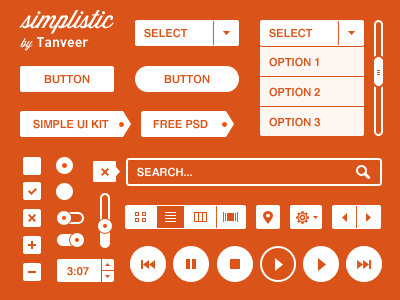
<style>
.page{position:relative;width:400px;height:300px;background:#da5319}
.page>*{position:absolute;margin:0}
.t1{font:25px "WisdomScriptAI";color:#ffffff}
.t2{font:11px "Helvetica-Bold";color:#da5319;text-transform:uppercase}
.t3{font:14px "DINPro-Bold";color:#ffffff}
.t4{font:12px "WisdomScriptAI";color:#ffffff}
.t5{font:11px/30px "Helvetica-Bold";color:#da5319;text-transform:uppercase}
.t6{font:11px "Helvetica-Bold";color:#ffffff;text-transform:uppercase}
</style>
<div class="page">
<p class="t1" style="left:19px;top:10px;width:95px;height:24px">simplistic</p>
<p class="t2" style="left:144px;top:28px;width:44px;height:10px">Select</p>
<p class="t2" style="left:269px;top:28px;width:44px;height:10px">Select</p>
<p class="t3" style="left:20px;top:37px;width:69px;height:14px"><span class="t4">by </span>Tanveer</p>
<p class="t5" style="left:269px;top:57px;width:51px;height:70px">Option 1<br>Option 2<br>Option 3</p>
<p class="t2" style="left:44px;top:74px;width:46px;height:10px">Button</p>
<p class="t2" style="left:164px;top:74px;width:46px;height:10px">Button</p>
<p class="t2" style="left:33px;top:119px;width:76px;height:10px">SImple Ui Kit</p>
<p class="t2" style="left:153px;top:119px;width:55px;height:10px">Free PSD</p>
<p class="t6" style="left:137px;top:167px;width:55px;height:10px">Search...</p>
<p class="t2" style="left:67px;top:267px;width:22px;height:9px">3:07</p>
</div>
